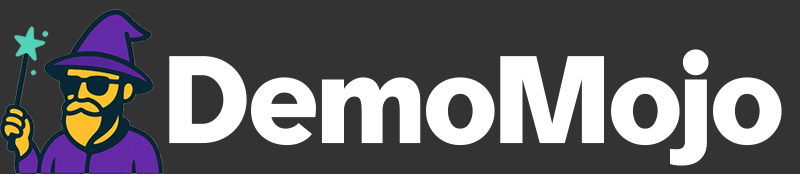
<style>
.page{position:relative;width:800px;height:174px;background:#333333}
.page>*{position:absolute;margin:0}
.t1{font:121.4px "ServiceNowSans-DisplayBold";color:#ffffff}
</style>
<div class="page">
<p class="t1" style="left:169px;top:49px;width:613px;height:117px">DemoMojo</p>
</div>
